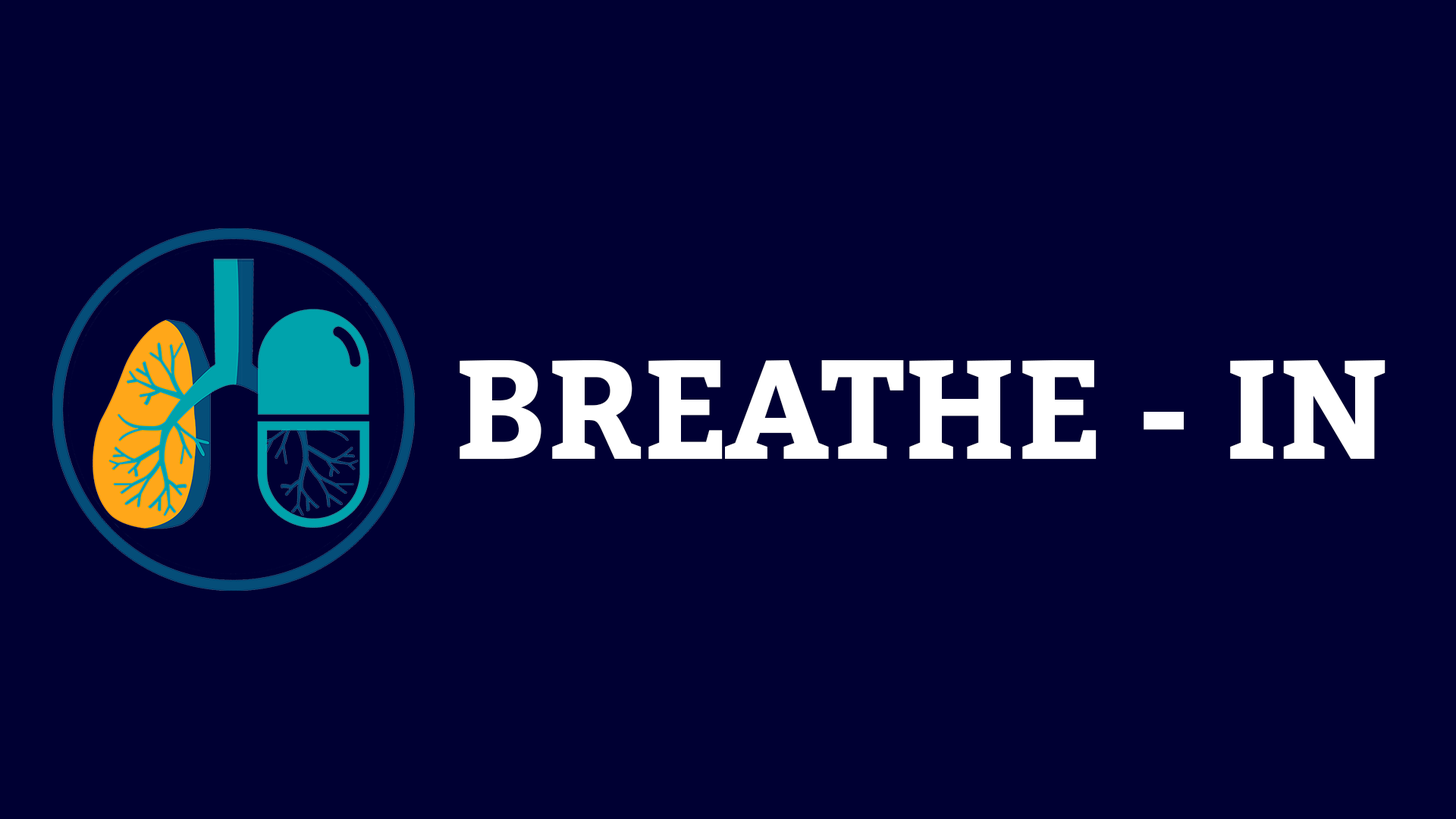
<style>
.page{position:relative;width:1456px;height:819px;background:#000033}
.page>*{position:absolute;margin:0}
.t1{font:140.4px "Bitter-Bold";color:#ffffff}
</style>
<div class="page">
<p class="t1" style="left:460px;top:360px;width:925px;height:100px">BREATHE - IN</p>
</div>
